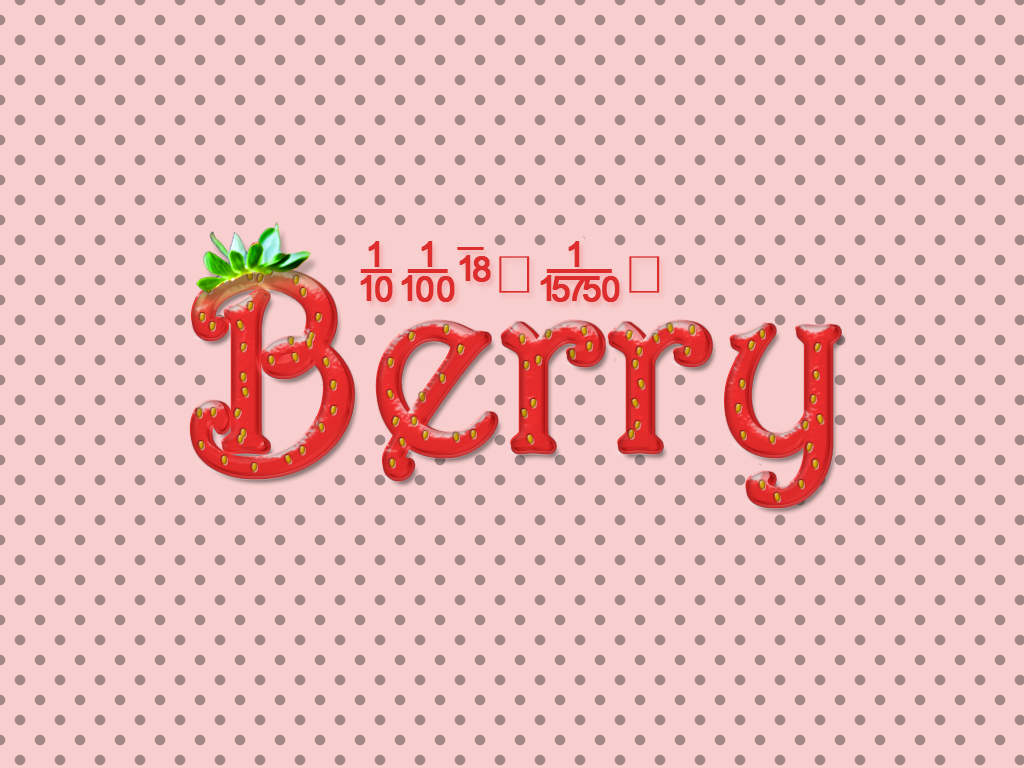
<style>
.page{position:relative;width:1024px;height:768px;background:#f8cece}
.page>*{position:absolute;margin:0}
.t1{font:57.3px "MSReferenceSpecialty";color:#de2d2d;font-weight:bold}
.t2{font:250px "Harrington";font-weight:bold}
</style>
<div class="page">
<p class="t1" style="left:360px;top:241px;width:300px;height:61px">strave</p>
<p class="t2" style="left:189px;top:266px;width:646px;height:236px">Berry</p>
<p class="t2" style="left:189px;top:266px;width:646px;height:236px">Berry</p>
<p class="t2" style="left:193px;top:270px;width:646px;height:236px">Berry</p>
</div>
